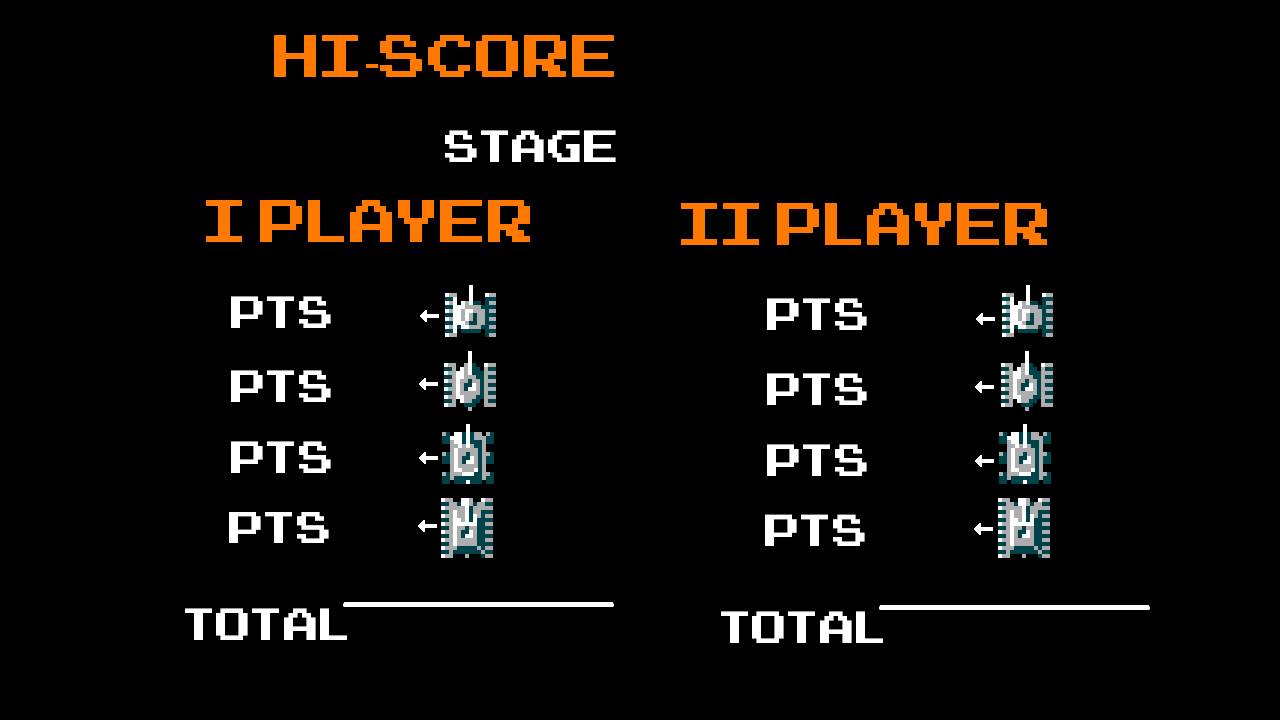
<style>
.page{position:relative;width:1280px;height:720px;background:#000000}
.page>*{position:absolute;margin:0}
.t1{font:48px "bcFont-7x7";color:#ff7800}
.t2{font:48px "TimesNewRomanPSMT";color:#ff7800}
.t3{font:36px "bcFont-7x7";color:#ffffff}
.t4{font:36.1px "bcFont-7x7";color:#ffffff}
.t5{font:35.6px "bcFont-7x7";color:#ffffff}
</style>
<div class="page">
<p class="t1" style="left:274px;top:35px;width:340px;height:42px">HI<span class="t2">-</span>SCORE</p>
<p class="t3" style="left:445px;top:130px;width:171px;height:32px">STAGE</p>
<p class="t1" style="left:206px;top:200px;width:324px;height:42px">I PLAYER</p>
<p class="t1" style="left:681px;top:203px;width:366px;height:42px">II PLAYER</p>
<p class="t4" style="left:231px;top:296px;width:100px;height:32px">PTS</p>
<p class="t4" style="left:767px;top:298px;width:100px;height:32px">PTS</p>
<p class="t4" style="left:231px;top:370px;width:100px;height:32px">PTS</p>
<p class="t4" style="left:767px;top:373px;width:100px;height:32px">PTS</p>
<p class="t4" style="left:231px;top:441px;width:100px;height:32px">PTS</p>
<p class="t4" style="left:767px;top:444px;width:100px;height:32px">PTS</p>
<p class="t5" style="left:229px;top:512px;width:100px;height:31px">PTS</p>
<p class="t5" style="left:765px;top:514px;width:100px;height:32px">PTS</p>
<p class="t4" style="left:185px;top:608px;width:162px;height:32px">TOTAL</p>
<p class="t4" style="left:721px;top:611px;width:162px;height:32px">TOTAL</p>
</div>
